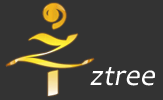
<style>
.page{position:relative;width:163px;height:100px;background:#333333}
.page>*{position:absolute;margin:0}
.t1{font:30px "Candara";color:#ffffff;font-style:italic}
</style>
<div class="page">
<p class="t1" style="left:90px;top:67px;width:65px;height:19px">ztree</p>
</div>
